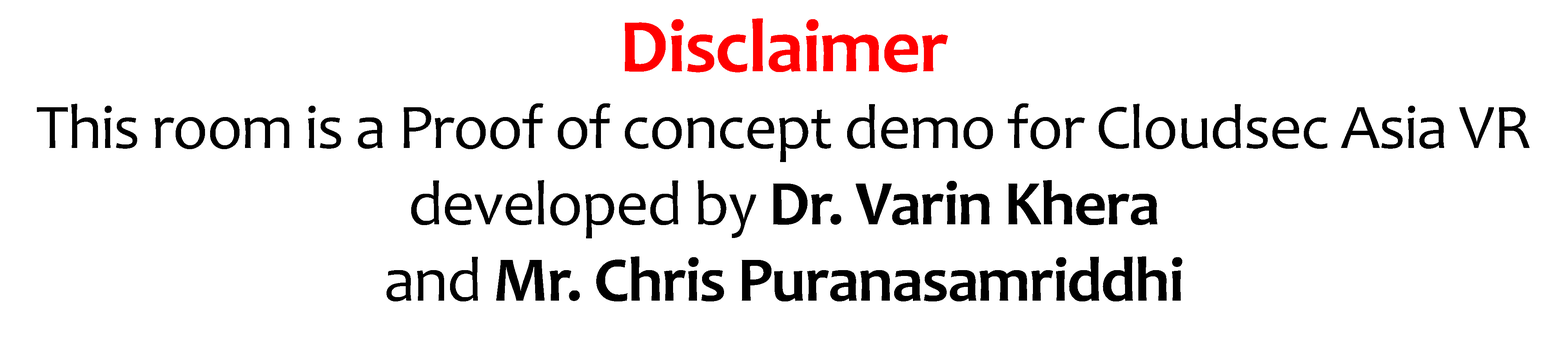
<style>
.page{position:relative;width:1568px;height:348px;background:#ffffff}
.page>*{position:absolute;margin:0}
.t1{font:63.7px "Candara";letter-spacing:-0.02em;color:#000000}
.t2{font:76.5px "Candara-Bold";letter-spacing:-0.02em;color:#ff0000}
.t3{font:63.7px "Candara-Bold";letter-spacing:-0.02em;color:#000000}
</style>
<div class="page">
<p class="t1" style="left:37px;top:18px;width:1493px;height:284px;text-align:center"><span class="t2">Disclaimer<br></span>This room is a Proof of concept demo for Cloudsec Asia VR <br>developed by <span class="t3">Dr. Varin Khera <br></span>and <span class="t3">Mr. Chris Puranasamriddhi</span></p>
</div>
